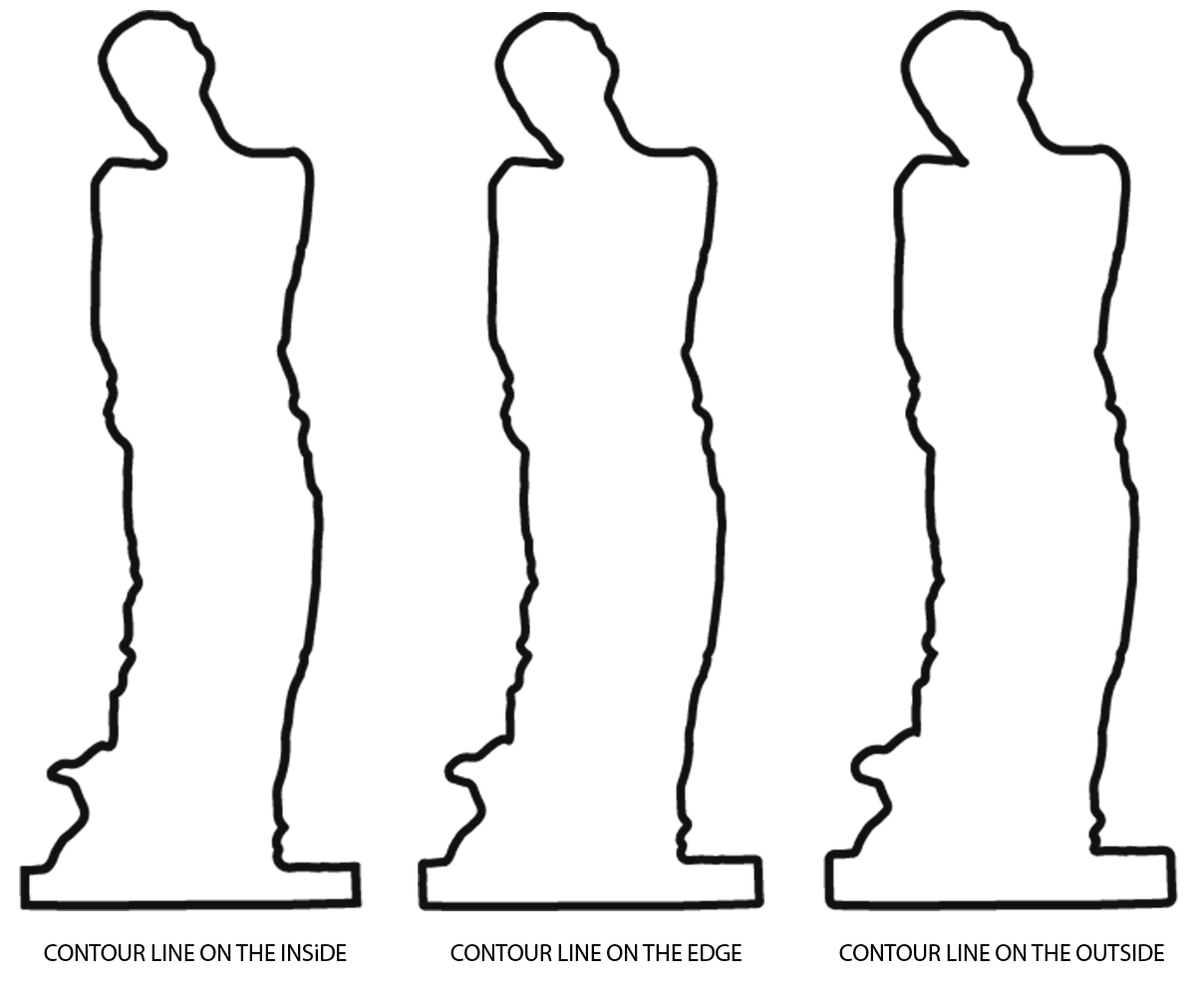
<style>
.page{position:relative;width:1196px;height:997px;background:#ffffff}
.page>*{position:absolute;margin:0}
.t1{font:23.9px "MyriadPro-Regular";color:#030303}
</style>
<div class="page">
<p class="t1" style="left:44px;top:944px;width:303px;height:17px">CONTOUR LINE ON THE INSiDE</p>
<p class="t1" style="left:451px;top:944px;width:291px;height:17px">CONTOUR LINE ON THE EDGE</p>
<p class="t1" style="left:839px;top:944px;width:325px;height:17px">CONTOUR LINE ON THE OUTSIDE</p>
</div>
